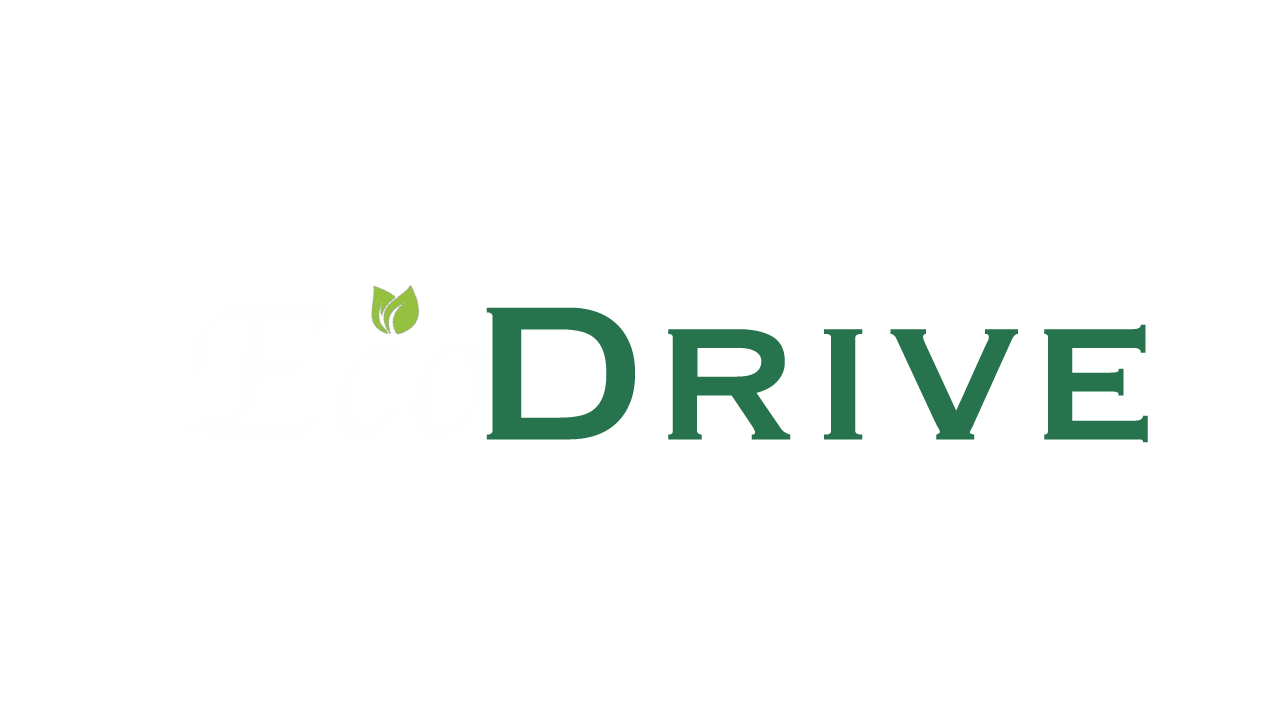
<style>
.page{position:relative;width:1280px;height:720px;background:#ffffff}
.page>*{position:absolute;margin:0}
.t1{font:250px "Copperplate";color:#26734d}
</style>
<div class="page">
<p class="t1" style="left:486px;top:307px;width:662px;height:136px">Drive</p>
</div>
